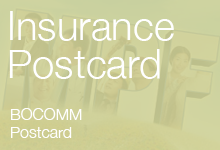
<style>
.page{position:relative;width:220px;height:150px}
.page>*{position:absolute;margin:0}
.t1{font:40px/38px "HelveticaNeue-Light";color:#ffffff}
.t2{font:16px/18px "HelveticaNeue-Light";color:#ffffff}
</style>
<div class="page">
<p class="t1" style="left:9px;top:11px;width:165px;height:68px">Insurance<br>Postcard</p>
<p class="t2" style="left:11px;top:108px;width:71px;height:30px">BOCOMM<br>Postcard</p>
</div>
